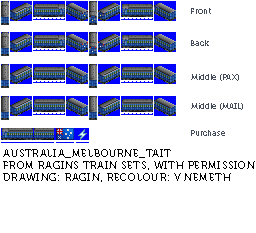
<style>
.page{position:relative;width:256px;height:233px;background:#ffffff}
.page>*{position:absolute;margin:0}
.t1{font:8px "Museo700-Regular";color:#444c5c}
.t2{font:10px "Museo700-Regular";letter-spacing:0.075em;color:#000000;text-transform:uppercase}
</style>
<div class="page">
<p class="t1" style="left:191px;top:8px;width:20px;height:6px">Front</p>
<p class="t1" style="left:191px;top:40px;width:18px;height:6px">Back</p>
<p class="t1" style="left:191px;top:74px;width:48px;height:7px">Middle (PAX)</p>
<p class="t1" style="left:191px;top:103px;width:52px;height:7px">Middle (MAIL)</p>
<p class="t1" style="left:191px;top:130px;width:34px;height:6px">Purchase</p>
<p class="t2" style="left:3px;top:149px;width:254px;height:33px">Australia_Melbourne_Tait<br>From Ragins Train Sets, with permission.<br>Drawing: Ragin, recolour: V Nemeth</p>
</div>
